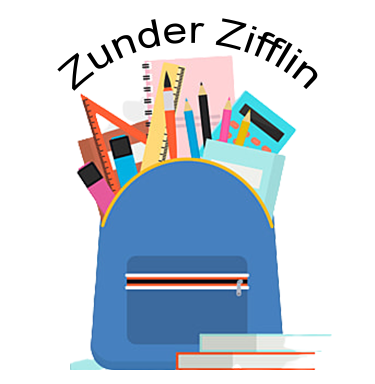
<style>
.page{position:relative;width:375px;height:384px;background:#ffffff}
.page>*{position:absolute;margin:0}
.t1{font:37.5px/45px "ArialMT";color:#000000}
</style>
<div class="page">
<p class="t1" style="left:57px;top:18px;width:261px;height:73px">Zunder Zifflin</p>
</div>
